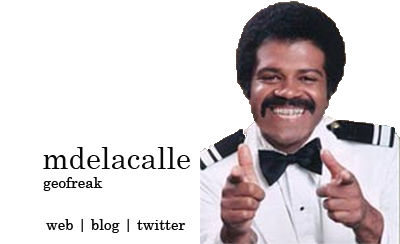
<style>
.page{position:relative;width:400px;height:244px;background:#ffffff}
.page>*{position:absolute;margin:0}
.t1{font:30px "Century";color:#090909}
.t2{font:15px "Century";color:#090909}
</style>
<div class="page">
<p class="t1" style="left:43px;top:147px;width:147px;height:22px">mdelacalle</p>
<p class="t2" style="left:43px;top:177px;width:60px;height:14px">geofreak</p>
<p class="t2" style="left:46px;top:219px;width:139px;height:14px">web | blog | twitter</p>
</div>
